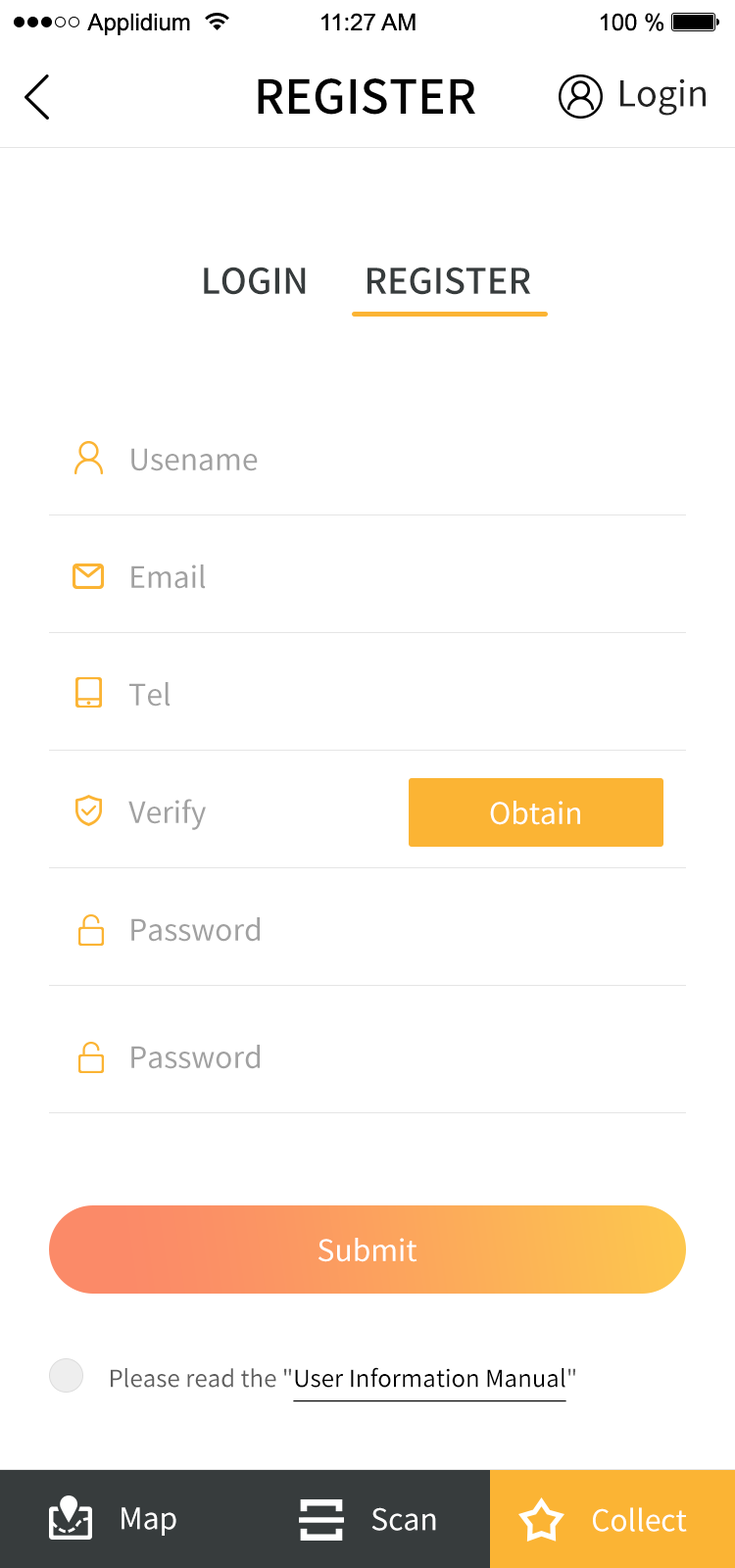
<style>
.page{position:relative;width:735px;height:1568px;background:#ffffff}
.page>*{position:absolute;margin:0}
.t1{font:47px "SourceHanSansCN-Medium";color:#010101;text-transform:uppercase}
.t2{font:35.3px "SourceHanSansCN-Regular";color:#222222}
.t3{font:35.3px "SourceHanSansCN-Medium";color:#373c3d;text-transform:uppercase}
.t4{font:29.4px "SourceHanSansCN-Regular";color:#a1a1a1}
.t5{font:29.4px "SourceHanSansCN-Regular";color:#ffffff}
.t6{font:23.5px "SourceHanSansCN-Regular";color:#000000;text-decoration:underline}
.t7{font:23.5px "SourceHanSansCN-Regular";color:#5f5f5f}
</style>
<div class="page">
<p class="t1" style="left:258px;top:78px;width:217px;height:37px">register</p>
<p class="t2" style="left:620px;top:78px;width:86px;height:38px">Login</p>
<p class="t3" style="left:204px;top:267px;width:327px;height:28px">Login       Register</p>
<p class="t4" style="left:131px;top:448px;width:127px;height:23px">Usename</p>
<p class="t4" style="left:131px;top:564px;width:75px;height:25px">Email</p>
<p class="t4" style="left:129px;top:682px;width:42px;height:25px">Tel</p>
<p class="t4" style="left:128px;top:799px;width:78px;height:31px">Verify</p>
<p class="t5" style="left:490px;top:801px;width:90px;height:24px">Obtain</p>
<p class="t4" style="left:131px;top:917px;width:129px;height:25px">Password</p>
<p class="t4" style="left:131px;top:1045px;width:129px;height:24px">Password</p>
<p class="t5" style="left:318px;top:1238px;width:99px;height:24px">Submit</p>
<p class="t6" style="left:111px;top:1367px;width:464px;height:35px"><span class="t7">Please read the "</span>User Information Manual<span class="t7">"</span></p>
<p class="t5" style="left:122px;top:1507px;width:54px;height:29px">Map</p>
<p class="t5" style="left:371px;top:1507px;width:65px;height:24px">Scan</p>
<p class="t5" style="left:593px;top:1507px;width:94px;height:25px">Collect</p>
</div>
